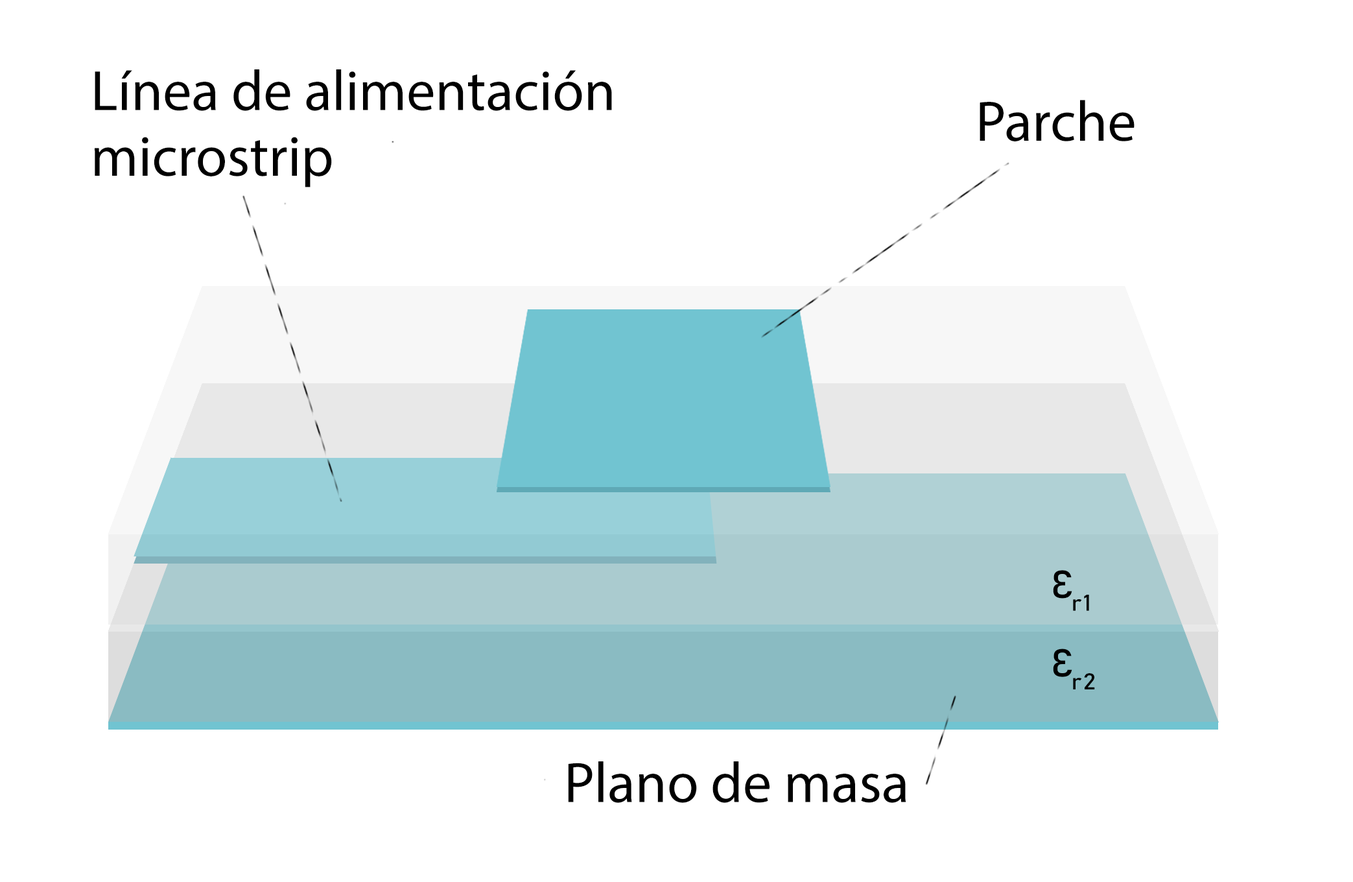
<style>
.page{position:relative;width:1353px;height:882px;background:#ffffff}
.page>*{position:absolute;margin:0}
.t1{font:98.2px/65.6px "MyriadPro-Regular";color:#000000}
.t2{font:98.1px "MyriadPro-Regular";color:#000000}
.t3{font:38.6px "Bahnschrift";letter-spacing:-0.06em;color:#000000;font-weight:bold;font-style:italic;scale:1.1 1}
.t4{font:98.2px "MyriadPro-Regular";color:#000000}
</style>
<div class="page">
<p class="t1" style="left:95px;top:69px;width:517px;height:118px">Línea de alimentación<br>microstrip</p>
<p class="t2" style="left:979px;top:100px;width:155px;height:41px">Parche</p>
<p class="t3" style="left:1053px;top:570px;width:36px;height:41px">Ɛr 1</p>
<p class="t3" style="left:1053px;top:648px;width:42px;height:41px">Ɛr 2</p>
<p class="t4" style="left:568px;top:761px;width:338px;height:41px">Plano de masa</p>
</div>
